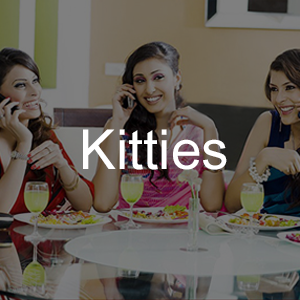
<style>
.page{position:relative;width:300px;height:300px}
.page>*{position:absolute;margin:0}
.t1{font:55px "ArialMT";color:#ffffff}
</style>
<div class="page">
<p class="t1" style="left:83px;top:129px;width:144px;height:41px">Kitties</p>
</div>
